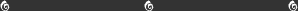
<style>
.page{position:relative;width:298px;height:11px;background:#333333}
.page>*{position:absolute;margin:0}
.t1{font:28px "Gigi-Regular";color:#ffffff}
</style>
<div class="page">
<p class="t1" style="left:0px;top:0px;width:298px;height:11px">o    o    o</p>
</div>
